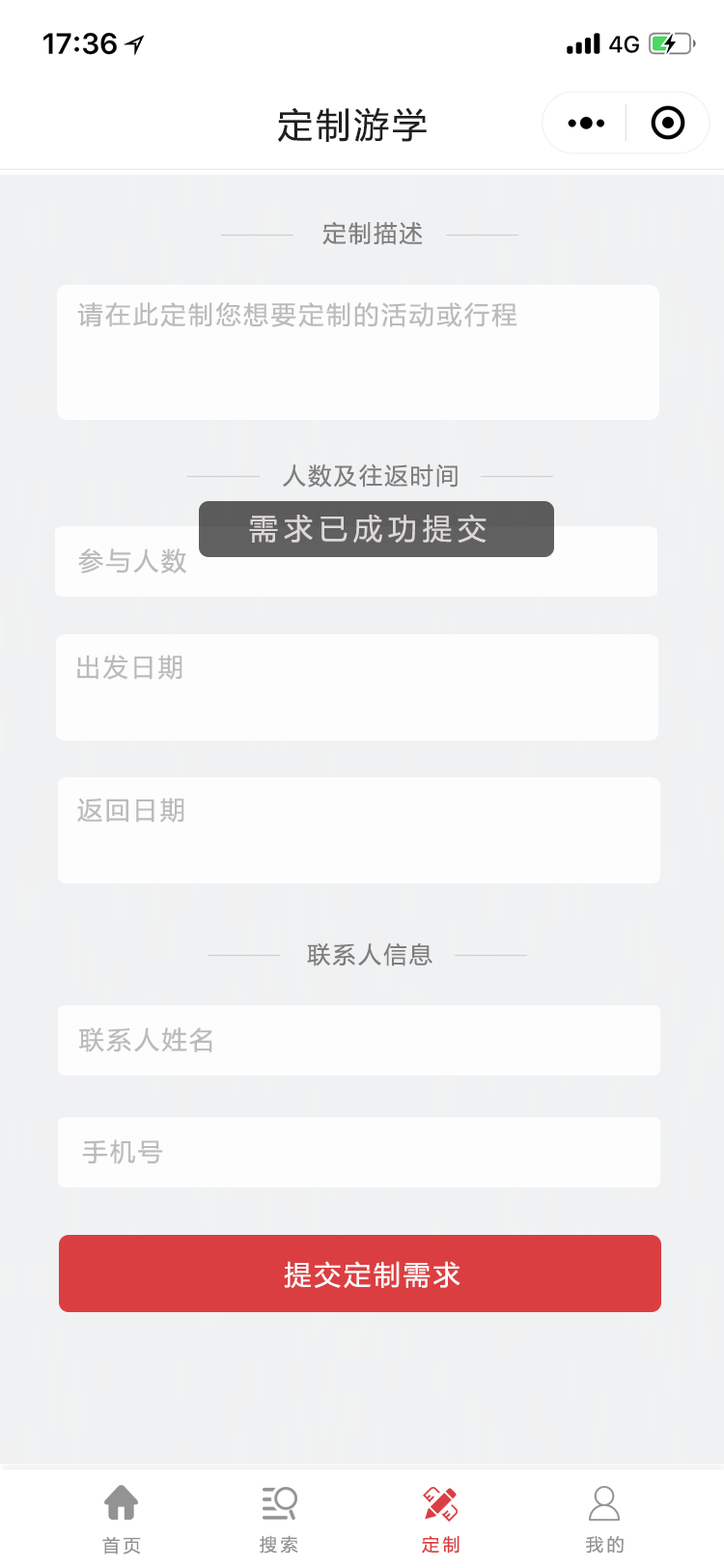
<style>
.page{position:relative;width:724px;height:1568px;background:#f0f1f2}
.page>*{position:absolute;margin:0}
.t1{font:34.8px "MicrosoftYaHei";letter-spacing:0.1em;color:#201f20}
.t2{font:23.2px "MicrosoftYaHei";letter-spacing:0.1em;color:#7e7e7e}
.t3{font:25.1px "MicrosoftYaHei";letter-spacing:0.1em;color:#bbbbbb}
.t4{font:29px "MicrosoftYaHei";letter-spacing:0.2em;color:#ddd8d8}
.t5{font:27px "MicrosoftYaHei";letter-spacing:0.1em;color:#fcfafa}
.t6{font:17.4px "MicrosoftYaHei";letter-spacing:0.2em;color:#949393}
.t7{font:17.4px "MicrosoftYaHei";letter-spacing:0.2em;color:#db3e41}
</style>
<div class="page">
<p class="t1" style="left:278px;top:107px;width:149px;height:35px">定制游学</p>
<p class="t2" style="left:322px;top:221px;width:101px;height:24px">定制描述</p>
<p class="t3" style="left:77px;top:302px;width:441px;height:25px">请在此定制您想要定制的活动或行程</p>
<p class="t2" style="left:283px;top:463px;width:175px;height:25px">人数及往返时间</p>
<p class="t4" style="left:249px;top:514px;width:238px;height:30px">需求已成功提交</p>
<p class="t3" style="left:78px;top:548px;width:108px;height:26px">参与人数</p>
<p class="t3" style="left:77px;top:655px;width:105px;height:25px">出发日期</p>
<p class="t3" style="left:77px;top:798px;width:107px;height:25px">返回日期</p>
<p class="t2" style="left:307px;top:942px;width:126px;height:24px">联系人信息</p>
<p class="t3" style="left:79px;top:1027px;width:133px;height:25px">联系人姓名</p>
<p class="t3" style="left:82px;top:1139px;width:81px;height:25px">手机号</p>
<p class="t5" style="left:284px;top:1261px;width:177px;height:27px">提交定制需求</p>
<p class="t6" style="left:102px;top:1536px;width:39px;height:18px">首页</p>
<p class="t6" style="left:260px;top:1535px;width:38px;height:19px">搜索</p>
<p class="t7" style="left:422px;top:1535px;width:38px;height:19px">定制</p>
<p class="t6" style="left:586px;top:1536px;width:38px;height:18px">我的</p>
</div>
